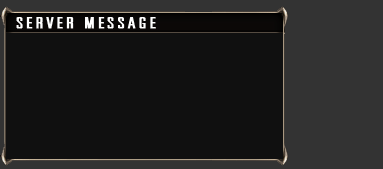
<style>
.page{position:relative;width:383px;height:169px;background:#101010}
.page>*{position:absolute;margin:0}
.t1{font:15px "UniversalAccreditation";letter-spacing:0.1em;color:#ffffff;text-transform:uppercase;font-weight:bold;scale:2 1}
</style>
<div class="page">
<p class="t1" style="left:16px;top:17px;width:140px;height:12px">Server Message</p>
</div>
